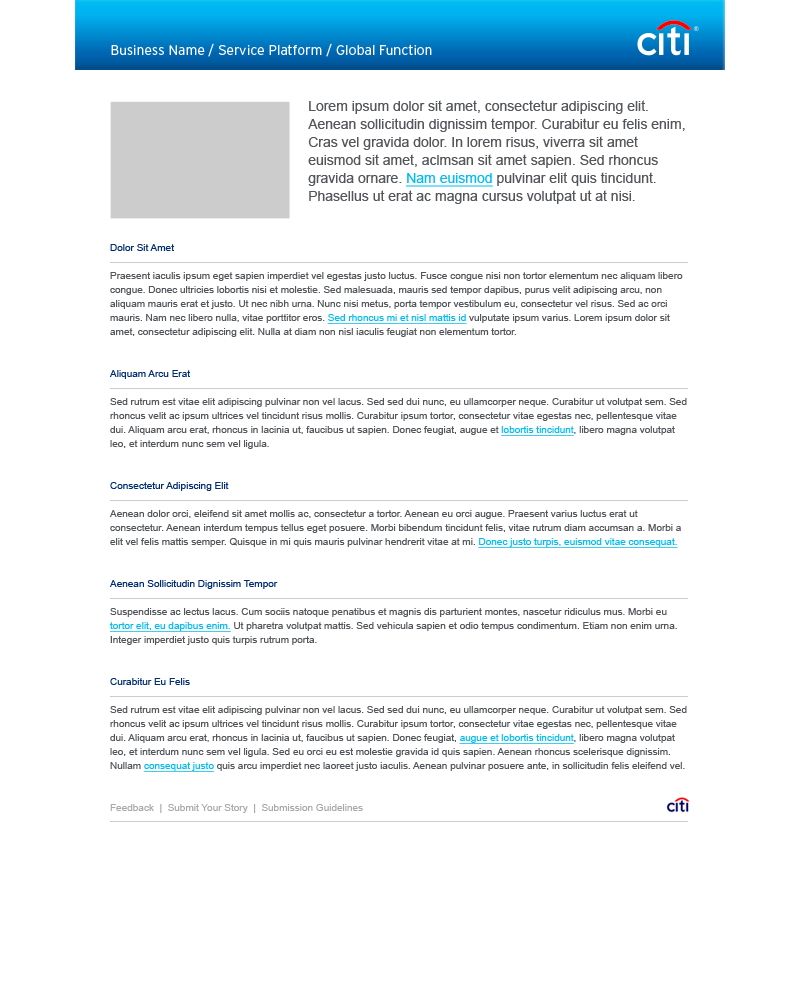
<style>
.page{position:relative;width:800px;height:1000px;background:#ffffff}
.page>*{position:absolute;margin:0}
.t1{font:14px "Interstate-Light";color:#ffffff}
.t2{font:14px/18px "ArialMT";color:#53565a}
.t3{font:14px/18px "ArialMT";color:#00bdf2;text-decoration:underline}
.t4{font:10px/14px "ArialMT";color:#53565a}
.t5{font:10px/14px "ArialMT";color:#002d72}
.t6{font:10px/14px "ArialMT";color:#00bdf2;text-decoration:underline}
.t7{font:10px/14px "ArialMT";color:#a9a9a9}
</style>
<div class="page">
<p class="t1" style="left:111px;top:43px;width:321px;height:14px">Business Name / Service Platform / Global Function</p>
<p class="t2" style="left:308px;top:100px;width:377px;height:104px">Lorem ipsum dolor sit amet, consectetur adipiscing elit. Aenean sollicitudin dignissim tempor. Curabitur eu felis enim, Cras vel gravida dolor. In lorem risus, viverra sit amet euismod sit amet, aclmsan sit amet sapien. Sed rhoncus gravida ornare. <span class="t3">Nam euismod</span> pulvinar elit quis tincidunt. Phasellus ut erat ac magna cursus volutpat ut at nisi.</p>
<p class="t4" style="left:109px;top:244px;width:578px;height:569px"><span class="t5">Dolor Sit Amet<br><br></span>Praesent iaculis ipsum eget sapien imperdiet vel egestas justo luctus. Fusce congue nisi non tortor elementum nec aliquam libero congue. Donec ultricies lobortis nisi et molestie. Sed malesuada, mauris sed tempor dapibus, purus velit adipiscing arcu, non aliquam mauris erat et justo. Ut nec nibh urna. Nunc nisi metus, porta tempor vestibulum eu, consectetur vel risus. Sed ac orci mauris. Nam nec libero nulla, vitae porttitor eros. <span class="t6">Sed rhoncus mi et nisl mattis id</span> vulputate ipsum varius. Lorem ipsum dolor sit amet, consectetur adipiscing elit. Nulla at diam non nisl iaculis feugiat non elementum tortor.<br><br><span class="t5"><br>Aliquam Arcu Erat<br><br></span>Sed rutrum est vitae elit adipiscing pulvinar non vel lacus. Sed sed dui nunc, eu ullamcorper neque. Curabitur ut volutpat sem. Sed rhoncus velit ac ipsum ultrices vel tincidunt risus mollis. Curabitur ipsum tortor, consectetur vitae egestas nec, pellentesque vitae dui. Aliquam arcu erat, rhoncus in lacinia ut, faucibus ut sapien. Donec feugiat, augue et <span class="t6">lobortis tincidunt</span>, libero magna volutpat leo, et interdum nunc sem vel ligula.<br><span class="t5"><br><br>Consectetur Adipiscing Elit<br><br></span>Aenean dolor orci, eleifend sit amet mollis ac, consectetur a tortor. Aenean eu orci augue. Praesent varius luctus erat ut consectetur. Aenean interdum tempus tellus eget posuere. Morbi bibendum tincidunt felis, vitae rutrum diam accumsan a. Morbi a elit vel felis mattis semper. Quisque in mi quis mauris pulvinar hendrerit vitae at mi. <span class="t6">Donec justo turpis, euismod vitae consequat.<br><br></span><span class="t5"><br>Aenean Sollicitudin Dignissim Tempor<br><br></span>Suspendisse ac lectus lacus. Cum sociis natoque penatibus et magnis dis parturient montes, nascetur ridiculus mus. Morbi eu <span class="t6">tortor elit, eu dapibus enim.</span> Ut pharetra volutpat mattis. Sed vehicula sapien et odio tempus condimentum. Etiam non enim urna. Integer imperdiet justo quis turpis rutrum porta.<br><br><span class="t5"><br>Curabitur Eu Felis<br><br></span>Sed rutrum est vitae elit adipiscing pulvinar non vel lacus. Sed sed dui nunc, eu ullamcorper neque. Curabitur ut volutpat sem. Sed rhoncus velit ac ipsum ultrices vel tincidunt risus mollis. Curabitur ipsum tortor, consectetur vitae egestas nec, pellentesque vitae dui. Aliquam arcu erat, rhoncus in lacinia ut, faucibus ut sapien. Donec feugiat, <span class="t6">augue et lobortis tincidunt</span>, libero magna volutpat leo, et interdum nunc sem vel ligula. Sed eu orci eu est molestie gravida id quis sapien. Aenean rhoncus scelerisque dignissim. Nullam <span class="t6">consequat justo</span> quis arcu imperdiet nec laoreet justo iaculis. Aenean pulvinar posuere ante, in sollicitudin felis eleifend vel.<br><br><br><span class="t7">Feedback  |  Submit Your Story  |  Submission Guidelines</span></p>
</div>
